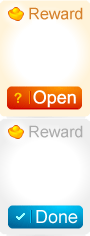
<style>
.page{position:relative;width:90px;height:236px;background:#ffffff}
.page>*{position:absolute;margin:0}
.t1{font:16px "ArialMT";color:#d5812c}
.t2{font:18px "ArialMT";color:#ffffff}
.t3{font:16px "ArialMT";color:#acacac}
</style>
<div class="page">
<p class="t1" style="left:28px;top:6px;width:55px;height:19px">Reward</p>
<p class="t2" style="left:33px;top:88px;width:44px;height:21px">Open</p>
<p class="t3" style="left:28px;top:124px;width:55px;height:19px">Reward</p>
<p class="t2" style="left:35px;top:208px;width:43px;height:21px">Done</p>
</div>
